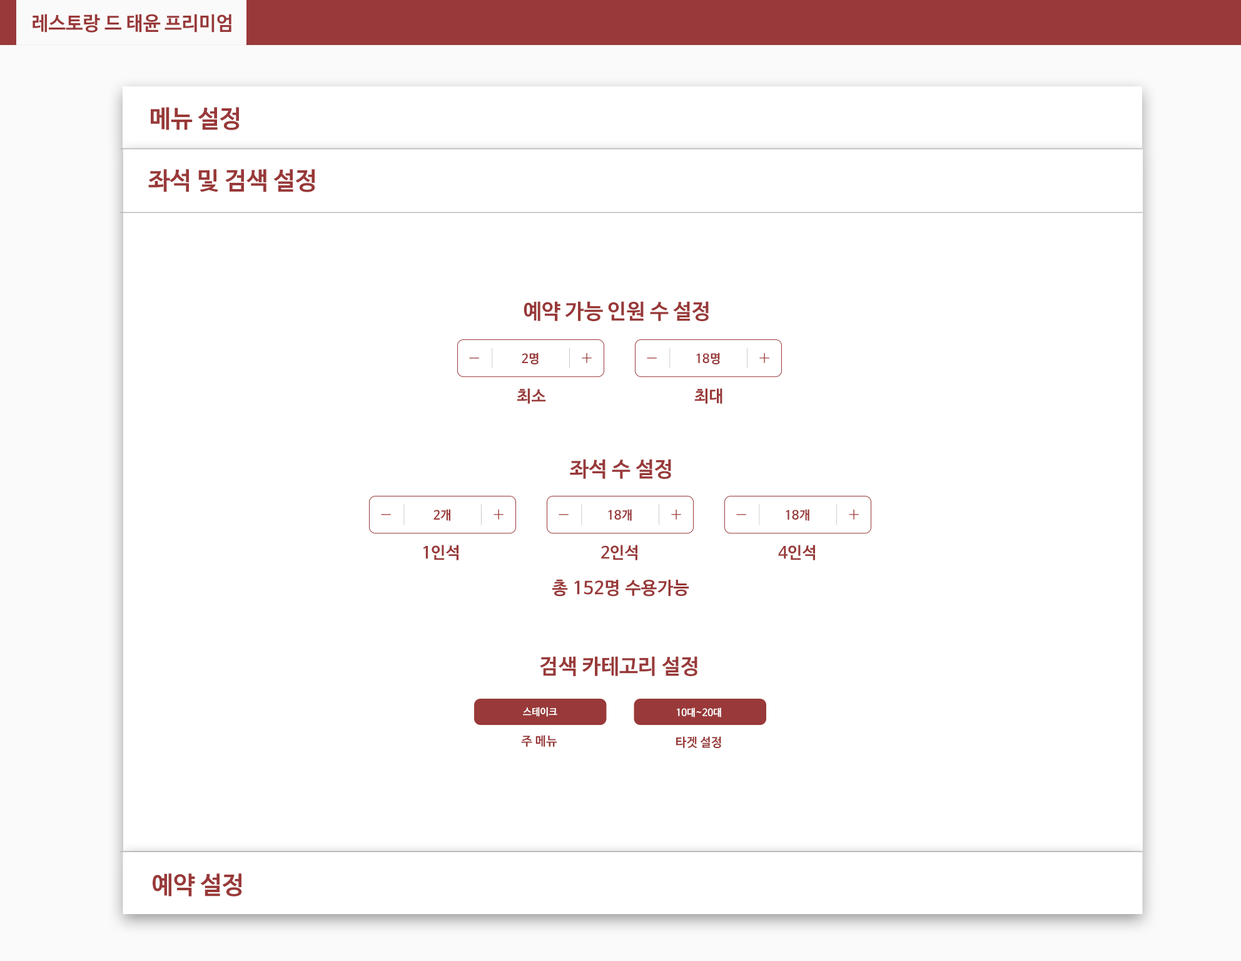
<style>
.page{position:relative;width:1241px;height:961px;background:#ffffff}
.page>*{position:absolute;margin:0}
.t1{font:19.3px "NanumBarunGothicBold";color:#993939}
.t2{font:24.5px "NanumBarunGothicBold";color:#993939}
.t3{font:21px "NanumBarunGothicBold";color:#993939}
.t4{font:12.2px "NanumBarunGothicBold";letter-spacing:0.025em;color:#993939}
.t5{font:16.3px "NanumBarunGothicBold";color:#993939}
.t6{font:17.6px "NanumBarunGothicBold";letter-spacing:0.025em;color:#993939}
.t7{font:9.6px "NanumBarunGothicBold";color:#ffffff}
.t8{font:12.3px "NanumBarunGothicBold";color:#993939}
</style>
<div class="page">
<p class="t1" style="left:33px;top:14px;width:199px;height:19px">레스토랑 드 태윤 프리미엄</p>
<p class="t2" style="left:151px;top:107px;width:89px;height:23px">메뉴 설정</p>
<p class="t2" style="left:148px;top:169px;width:167px;height:23px">좌석 및 검색 설정</p>
<p class="t3" style="left:524px;top:301px;width:185px;height:20px">예약 가능 인원 수 설정</p>
<p class="t4" style="left:522px;top:352px;width:17px;height:12px">2명</p>
<p class="t4" style="left:696px;top:352px;width:24px;height:12px">18명</p>
<p class="t5" style="left:517px;top:388px;width:29px;height:16px">최소</p>
<p class="t5" style="left:695px;top:388px;width:28px;height:16px">최대</p>
<p class="t3" style="left:570px;top:459px;width:101px;height:20px">좌석 수 설정</p>
<p class="t4" style="left:434px;top:509px;width:17px;height:12px">2개</p>
<p class="t4" style="left:608px;top:509px;width:24px;height:12px">18개</p>
<p class="t4" style="left:786px;top:509px;width:24px;height:12px">18개</p>
<p class="t5" style="left:424px;top:544px;width:35px;height:16px">1인석</p>
<p class="t5" style="left:601px;top:544px;width:37px;height:16px">2인석</p>
<p class="t5" style="left:778px;top:544px;width:37px;height:16px">4인석</p>
<p class="t6" style="left:552px;top:579px;width:138px;height:17px">총 152명 수용가능</p>
<p class="t3" style="left:540px;top:656px;width:158px;height:20px">검색 카테고리 설정</p>
<p class="t7" style="left:523px;top:706px;width:35px;height:10px">스테이크</p>
<p class="t7" style="left:677px;top:707px;width:44px;height:10px">10대~20대</p>
<p class="t8" style="left:521px;top:735px;width:37px;height:12px">주 메뉴</p>
<p class="t8" style="left:676px;top:736px;width:45px;height:12px">타겟 설정</p>
<p class="t2" style="left:153px;top:873px;width:89px;height:23px">예약 설정</p>
</div>
